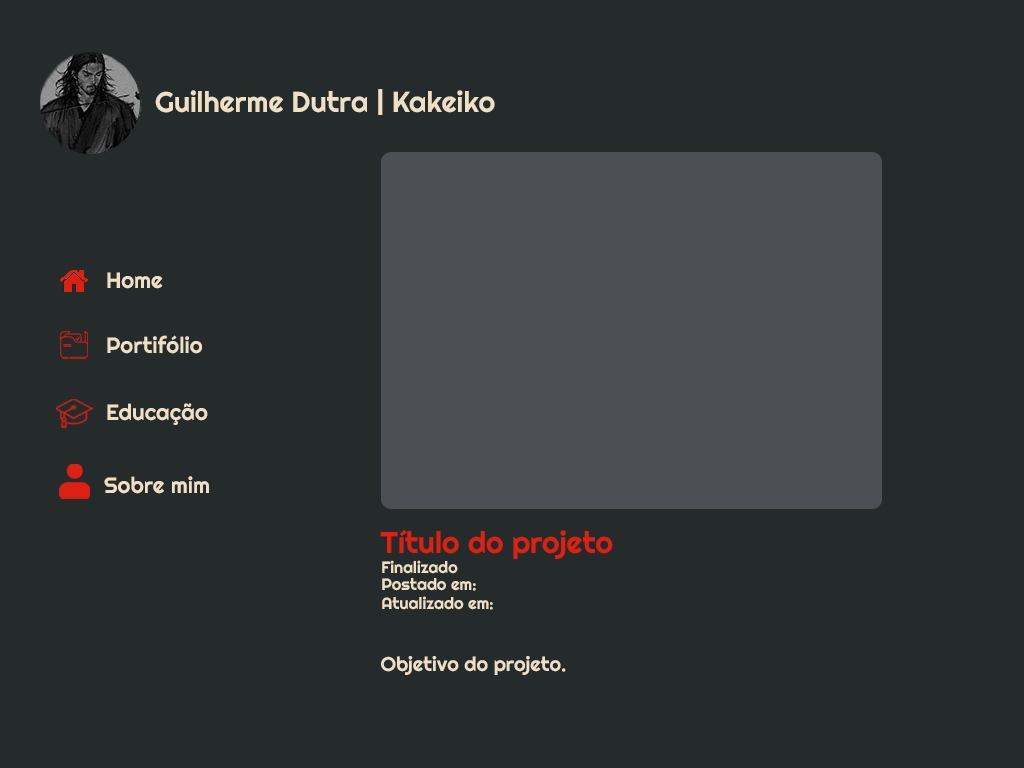
<style>
.page{position:relative;width:1024px;height:768px;background:#252b2b}
.page>*{position:absolute;margin:0}
.t1{font:28.7px "Righteous-Regular";color:#efdfc5}
.t2{font:22.3px "Righteous-Regular";color:#efdfc5}
.t3{font:30px "Righteous-Regular";color:#dc2011}
.t4{font:16.3px "Righteous-Regular";color:#efdfc5}
.t5{font:16.4px "Righteous-Regular";color:#efdfc5}
.t6{font:20px "Righteous-Regular";color:#efdfc5}
</style>
<div class="page">
<p class="t1" style="left:155px;top:89px;width:340px;height:26px">Guilherme Dutra | Kakeiko</p>
<p class="t2" style="left:107px;top:272px;width:56px;height:17px">Home</p>
<p class="t2" style="left:107px;top:335px;width:95px;height:19px">Portifólio</p>
<p class="t2" style="left:107px;top:403px;width:101px;height:22px">Educação</p>
<p class="t2" style="left:104px;top:476px;width:105px;height:18px">Sobre mim</p>
<p class="t3" style="left:380px;top:529px;width:233px;height:30px">Título do projeto</p>
<p class="t4" style="left:382px;top:560px;width:76px;height:14px">Finalizado</p>
<p class="t5" style="left:382px;top:578px;width:94px;height:13px">Postado em:</p>
<p class="t5" style="left:382px;top:596px;width:111px;height:14px">Atualizado em:</p>
<p class="t6" style="left:381px;top:656px;width:185px;height:19px">Objetivo do projeto.</p>
</div>
